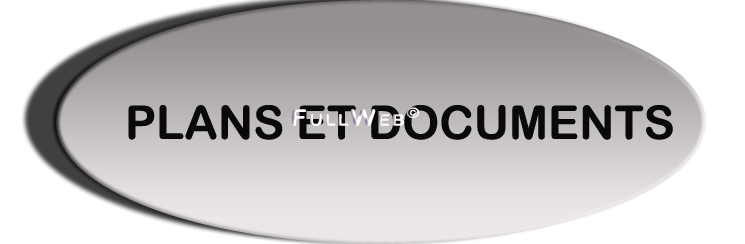
<style>
.page{position:relative;width:745px;height:244px;background:#ffffff}
.page>*{position:absolute;margin:0}
.t1{font:46.6px "ArialRoundedMTBold";color:#090909;font-variant:small-caps}
.t2{font:22.6px "ArialRoundedMTBold";letter-spacing:0.075em;color:#fefefc;font-variant:small-caps;scale:1.19 1}
.t3{font:24px "ArialRoundedMTBold";letter-spacing:0.075em;color:#fefefc;font-variant:small-caps;scale:1.19 1}
</style>
<div class="page">
<p class="t1" style="left:128px;top:105px;width:545px;height:35px">PLANS ET DOCUMENTS</p>
<p class="t2" style="left:292px;top:107px;width:128px;height:19px">FullWeb<span class="t3">©</span></p>
</div>
